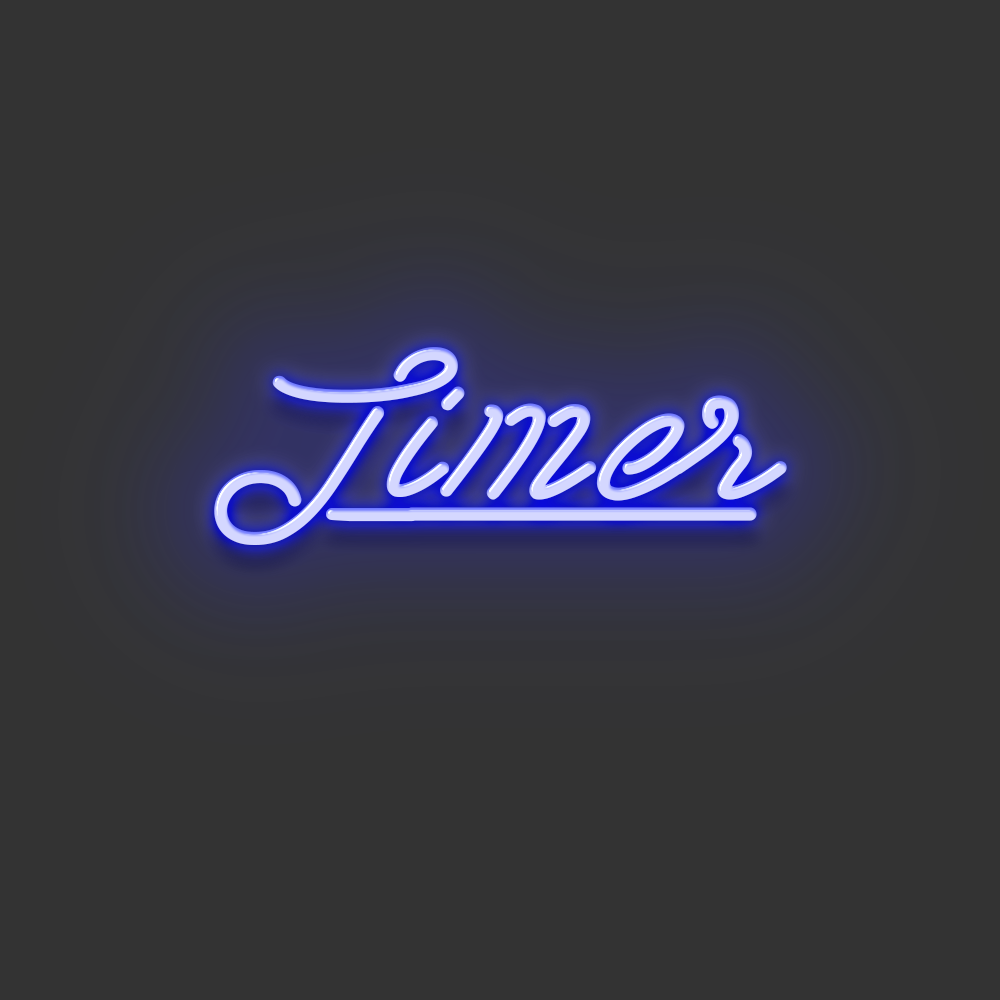
<style>
.page{position:relative;width:1000px;height:1000px;background:#333333}
.page>*{position:absolute;margin:0}
.t1{font:250px "LasEnterPersonalUseOnly";color:#d4d7ff}
</style>
<div class="page">
<p class="t1" style="left:214px;top:347px;width:573px;height:198px">Timer</p>
</div>
